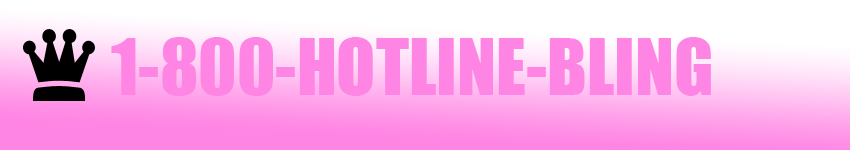
<style>
.page{position:relative;width:850px;height:150px;background:#ff85e4}
.page>*{position:absolute;margin:0}
.t1{font:72px "Impact";color:#ff85e4}
</style>
<div class="page">
<p class="t1" style="left:111px;top:37px;width:600px;height:59px">1-800-HOTLINE-BLING</p>
</div>
